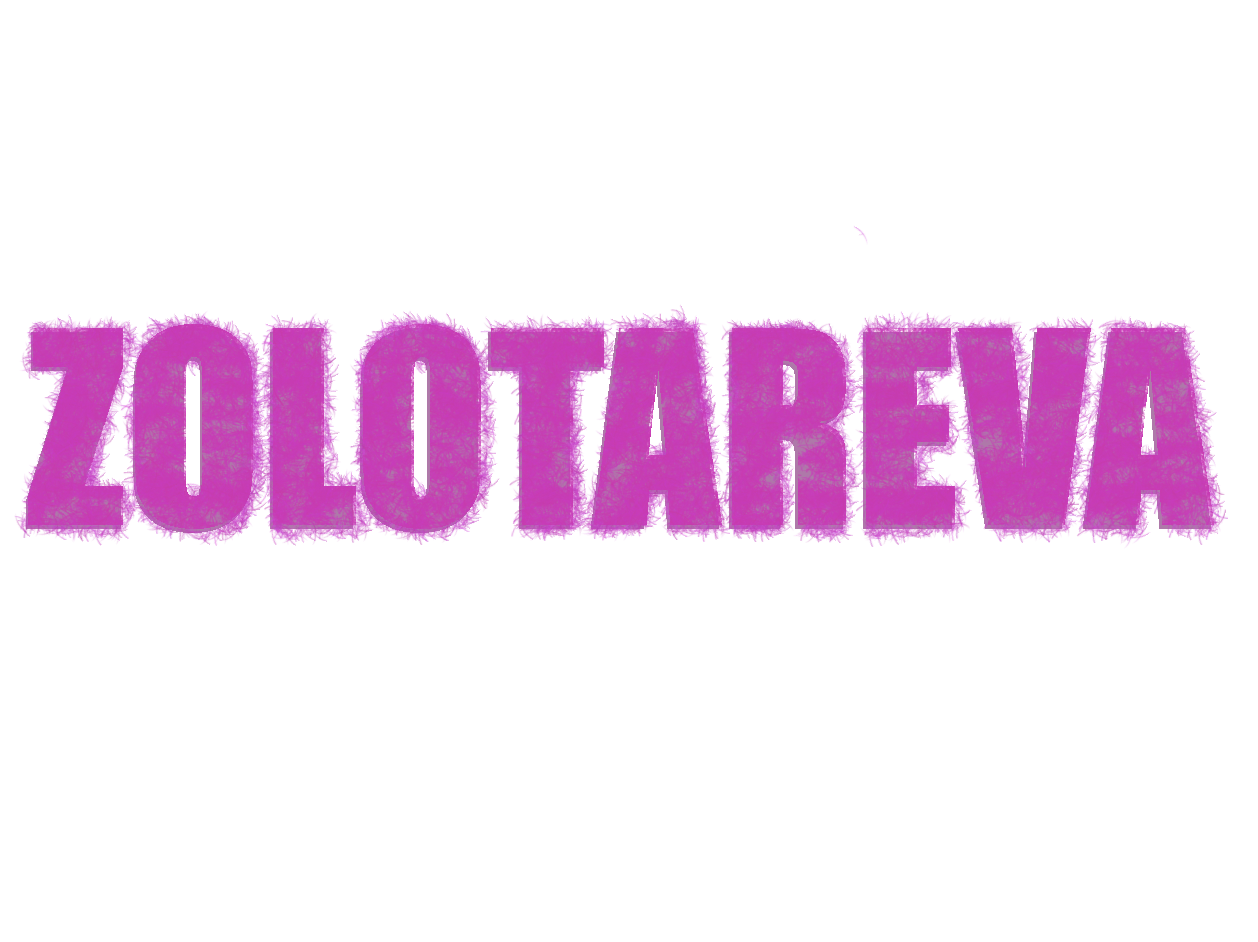
<style>
.page{position:relative;width:1258px;height:942px;background:#ffffff}
.page>*{position:absolute;margin:0}
.t1{font:249.4px "Impact";color:#c441b3}
</style>
<div class="page">
<p class="t1" style="left:26px;top:328px;width:1185px;height:205px">ZOLOTAREVA</p>
</div>
